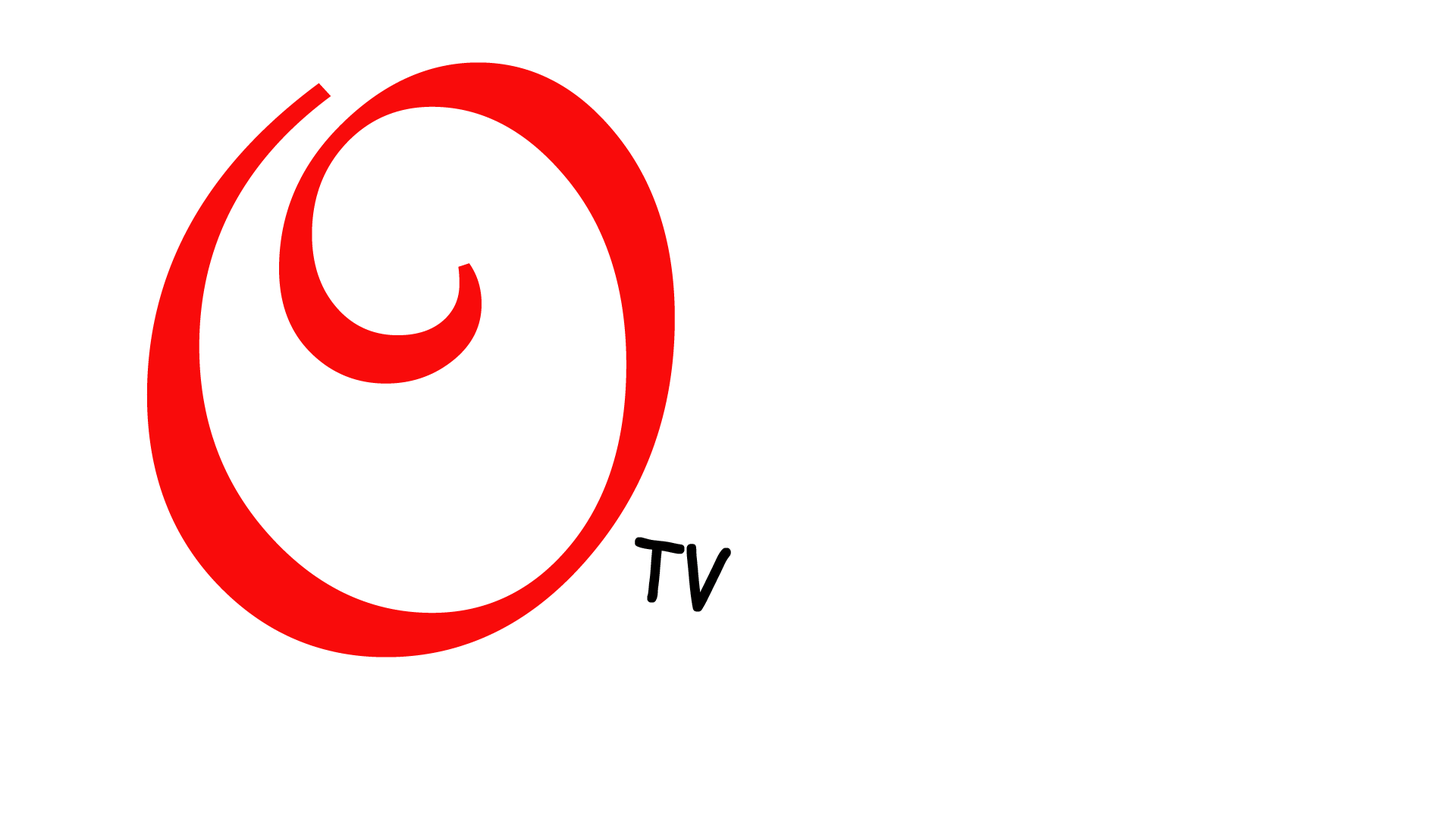
<style>
.page{position:relative;width:1456px;height:819px;background:#ffffff}
.page>*{position:absolute;margin:0}
.t1{font:903.9px "FrenchScriptMT";color:#f90b0b;scale:1.22 1}
.t2{font:83.5px "ComicSansMS";color:#010000;font-weight:bold;scale:0.87 1}
</style>
<div class="page">
<p class="t1" style="left:146px;top:62px;width:529px;height:595px">O</p>
<p class="t2" style="left:635px;top:537px;width:96px;height:75px;rotate:8deg">TV</p>
</div>
